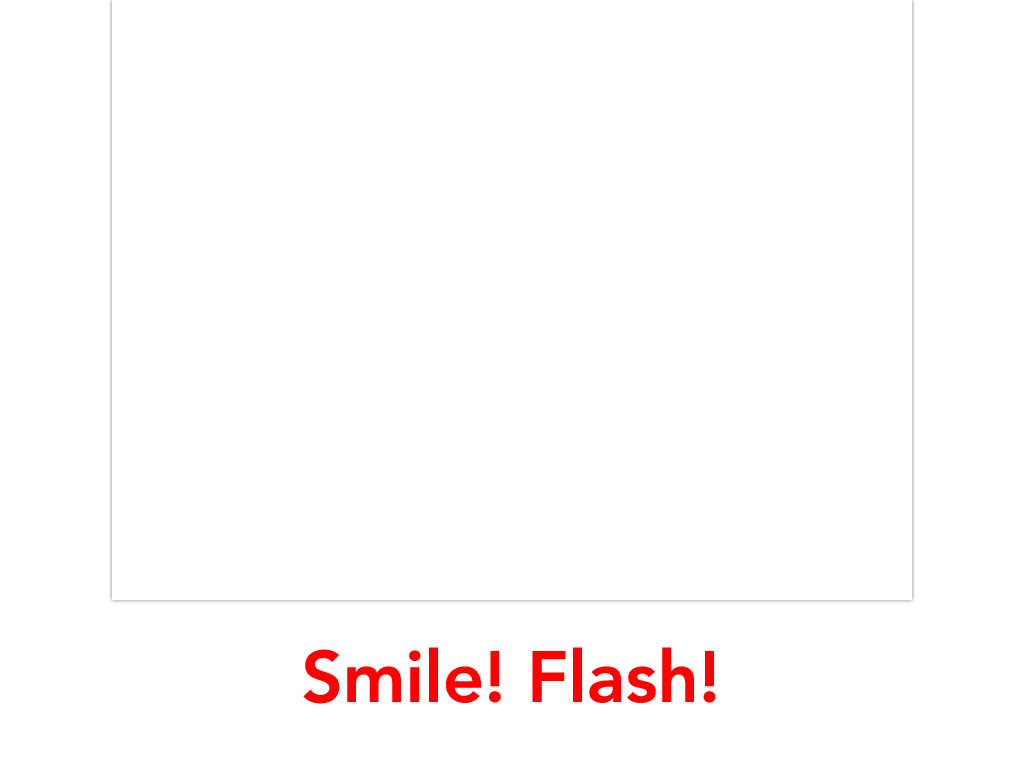
<style>
.page{position:relative;width:1024px;height:768px;background:#ffffff}
.page>*{position:absolute;margin:0}
.t1{font:72px "Avenir-Heavy";color:#ff0000}
</style>
<div class="page">
<p class="t1" style="left:303px;top:647px;width:413px;height:57px">Smile! Flash!</p>
</div>
